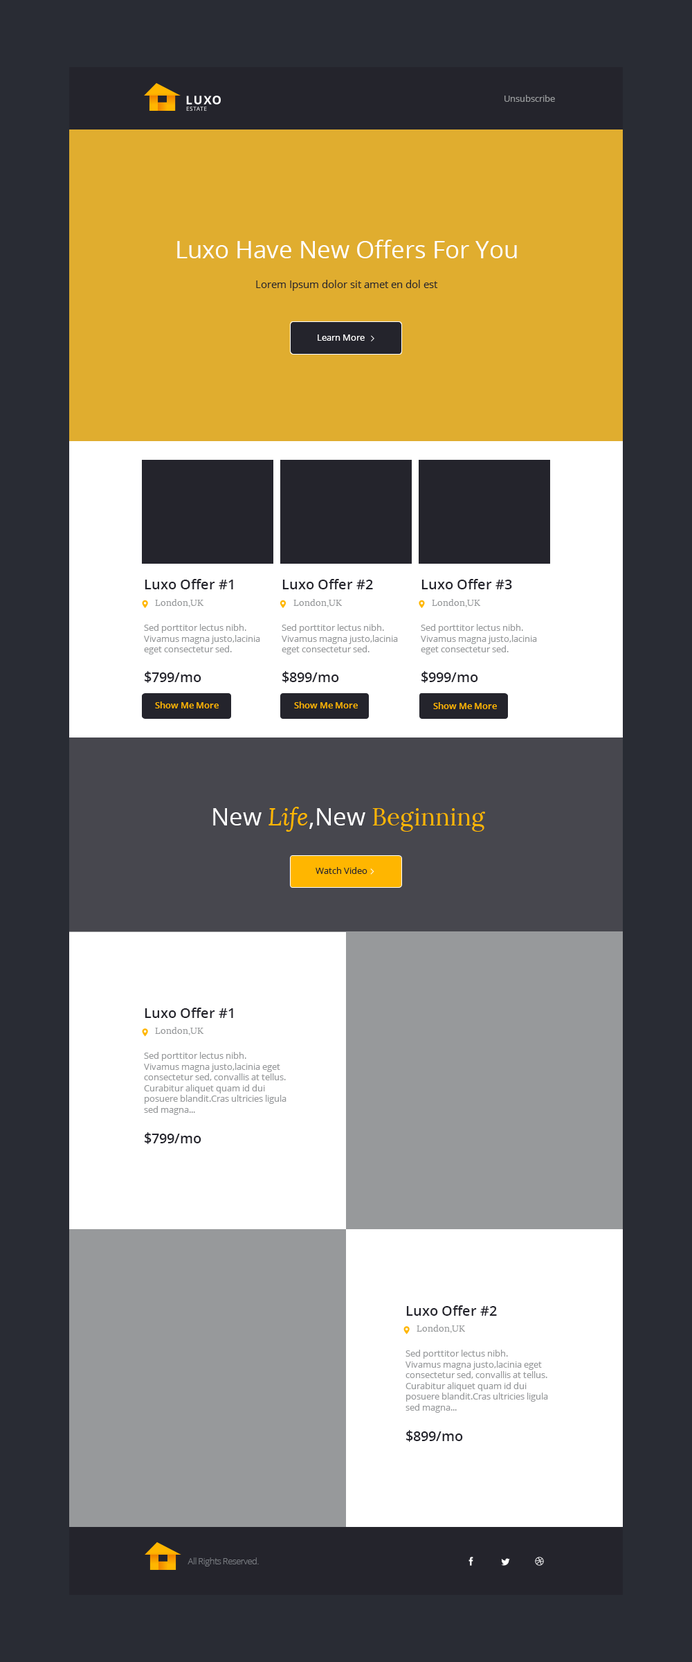
<style>
.page{position:relative;width:692px;height:1662px;background:#292c34}
.page>*{position:absolute;margin:0}
.t1{font:9px "OpenSans";color:#97999b}
.t2{font:24.2px "OpenSans";color:#ffffff}
.t3{font:10.4px "OpenSans";color:#24242c}
.t4{font:9px "OpenSans";color:#ffffff}
.t5{font:13.8px "OpenSans-Semibold";color:#24242c}
.t6{font:9px "Lora-Regular";color:#97999b}
.t7{font:9px "OpenSans-Semibold";color:#ffb600}
.t8{font:24.2px "Lora-Regular";color:#ffb600}
.t9{font:24.2px "Lora-Italic";color:#ffb600}
.t10{font:9px "OpenSans";color:#24242c}
.t11{font:9px "OpenSans-Light";letter-spacing:-0.04em;color:#797c82}
</style>
<div class="page">
<p class="t1" style="left:505px;top:95px;width:50px;height:7px">Unsubscribe</p>
<p class="t2" style="left:177px;top:240px;width:340px;height:18px">Luxo Have New Offers For You</p>
<p class="t3" style="left:256px;top:280px;width:182px;height:11px">Lorem Ipsum dolor sit amet en dol est</p>
<p class="t4" style="left:318px;top:334px;width:47px;height:7px">Learn More</p>
<p class="t5" style="left:145px;top:579px;width:88px;height:10px">Luxo Offer #1</p>
<p class="t5" style="left:282px;top:579px;width:91px;height:10px">Luxo Offer #2</p>
<p class="t5" style="left:422px;top:579px;width:90px;height:10px">Luxo Offer #3</p>
<p class="t6" style="left:155px;top:599px;width:49px;height:8px">London,UK</p>
<p class="t6" style="left:294px;top:599px;width:48px;height:8px">London,UK</p>
<p class="t6" style="left:432px;top:599px;width:48px;height:8px">London,UK</p>
<p class="t1" style="left:144px;top:624px;width:116px;height:30px">Sed porttitor lectus nibh. <br>Vivamus magna justo,lacinia <br>eget consectetur sed.</p>
<p class="t1" style="left:282px;top:624px;width:116px;height:30px">Sed porttitor lectus nibh. <br>Vivamus magna justo,lacinia <br>eget consectetur sed.</p>
<p class="t1" style="left:421px;top:624px;width:116px;height:30px">Sed porttitor lectus nibh. <br>Vivamus magna justo,lacinia <br>eget consectetur sed.</p>
<p class="t5" style="left:145px;top:671px;width:56px;height:12px">$799/mo</p>
<p class="t5" style="left:282px;top:671px;width:57px;height:12px">$899/mo</p>
<p class="t5" style="left:422px;top:671px;width:56px;height:12px">$999/mo</p>
<p class="t7" style="left:155px;top:701px;width:64px;height:7px">Show Me More</p>
<p class="t7" style="left:294px;top:701px;width:64px;height:7px">Show Me More</p>
<p class="t7" style="left:433px;top:702px;width:64px;height:7px">Show Me More</p>
<p class="t8" style="left:213px;top:807px;width:272px;height:24px"><span class="t2">New </span><span class="t9">Life</span><span class="t2">,New </span>Beginning</p>
<p class="t10" style="left:316px;top:867px;width:52px;height:7px">Watch Video</p>
<p class="t5" style="left:145px;top:1007px;width:88px;height:11px">Luxo Offer #1</p>
<p class="t6" style="left:155px;top:1027px;width:49px;height:8px">London,UK</p>
<p class="t1" style="left:144px;top:1052px;width:143px;height:63px">Sed porttitor lectus nibh. <br>Vivamus magna justo,lacinia eget <br>consectetur sed, convallis at tellus. <br>Curabitur aliquet quam id dui <br>posuere blandit.Cras ultricies ligula <br>sed magna...</p>
<p class="t5" style="left:145px;top:1132px;width:56px;height:12px">$799/mo</p>
<p class="t5" style="left:406px;top:1305px;width:91px;height:10px">Luxo Offer #2</p>
<p class="t6" style="left:417px;top:1324px;width:48px;height:9px">London,UK</p>
<p class="t1" style="left:406px;top:1349px;width:142px;height:63px">Sed porttitor lectus nibh. <br>Vivamus magna justo,lacinia eget <br>consectetur sed, convallis at tellus. <br>Curabitur aliquet quam id dui <br>posuere blandit.Cras ultricies ligula <br>sed magna...</p>
<p class="t5" style="left:406px;top:1430px;width:57px;height:11px">$899/mo</p>
<p class="t11" style="left:188px;top:1557px;width:71px;height:9px">All Rights Reserved.</p>
</div>
